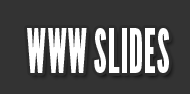
<style>
.page{position:relative;width:190px;height:94px;background:#333333}
.page>*{position:absolute;margin:0}
.t1{font:60px "LeagueGothic-CondensedRegular";color:#ffffff}
</style>
<div class="page">
<p class="t1" style="left:27px;top:28px;width:142px;height:45px">WWW SLIDES</p>
</div>
